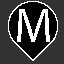
<style>
.page{position:relative;width:64px;height:64px;background:#333333}
.page>*{position:absolute;margin:0}
.t1{font:48px "MyriadPro-Regular";color:#ffffff}
</style>
<div class="page">
<p class="t1" style="left:17px;top:9px;width:33px;height:33px">M</p>
</div>
